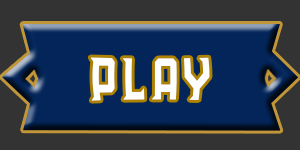
<style>
.page{position:relative;width:300px;height:150px;background:#032559}
.page>*{position:absolute;margin:0}
.t1{font:62.5px "Lorde-Havana";letter-spacing:0.1em;color:#ffffff;scale:0.75 1}
</style>
<div class="page">
<p class="t1" style="left:90px;top:57px;width:120px;height:44px">Play</p>
</div>
